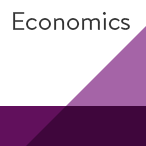
<style>
.page{position:relative;width:146px;height:146px;background:#ffffff}
.page>*{position:absolute;margin:0}
.t1{font:26px "BrandonText-Regular";letter-spacing:-0.01em;color:#333333}
</style>
<div class="page">
<p class="t1" style="left:13px;top:11px;width:117px;height:19px">Economics</p>
</div>
